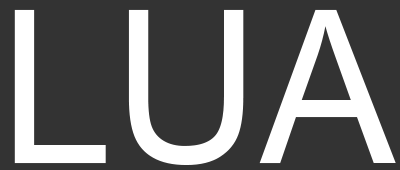
<style>
.page{position:relative;width:400px;height:170px;background:#333333}
.page>*{position:absolute;margin:0}
.t1{font:213.9px "ArialMT";color:#ffffff;scale:0.95 1}
</style>
<div class="page">
<p class="t1" style="left:14px;top:9px;width:382px;height:156px">LUA</p>
</div>
